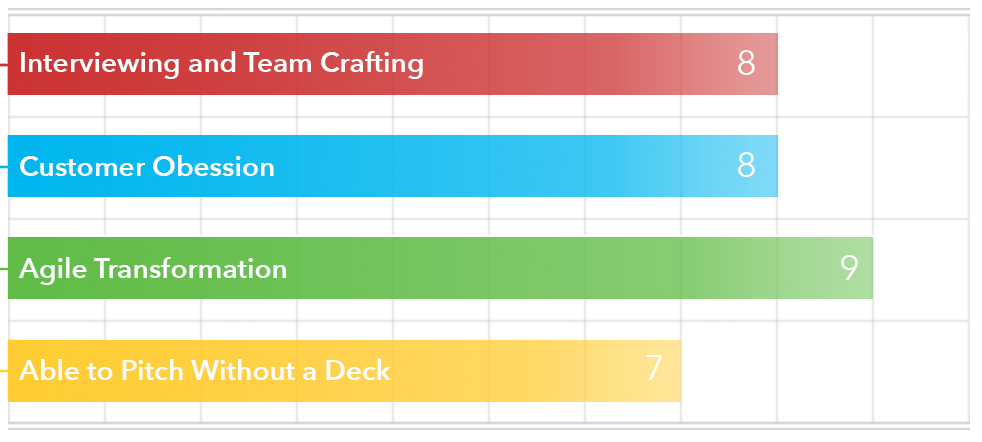
<style>
.page{position:relative;width:982px;height:442px;background:#ffffff}
.page>*{position:absolute;margin:0}
.t1{font:28px "AvenirNext-DemiBold";color:#ffffff}
.t2{font:36px "AvenirNext-Regular";color:#ffffff}
</style>
<div class="page">
<p class="t1" style="left:21px;top:51px;width:402px;height:28px">Interviewing and Team Crafting</p>
<p class="t2" style="left:738px;top:50px;width:17px;height:25px">8</p>
<p class="t1" style="left:20px;top:155px;width:254px;height:21px">Customer Obession</p>
<p class="t2" style="left:738px;top:152px;width:17px;height:25px">8</p>
<p class="t1" style="left:18px;top:257px;width:268px;height:28px">Agile Transformation</p>
<p class="t2" style="left:841px;top:255px;width:17px;height:25px">9</p>
<p class="t1" style="left:18px;top:358px;width:373px;height:22px">Able to Pitch Without a Deck</p>
<p class="t2" style="left:646px;top:355px;width:16px;height:25px">7</p>
</div>
